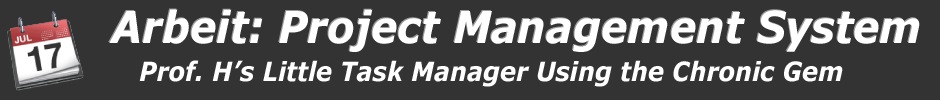
<style>
.page{position:relative;width:940px;height:100px;background:#333333}
.page>*{position:absolute;margin:0}
.t1{font:44px "Verdana-BoldItalic";color:#ffffff;scale:0.91 1}
.t2{font:26.4px "Verdana-BoldItalic";color:#ffffff;scale:0.91 1}
</style>
<div class="page">
<p class="t1" style="left:108px;top:8px;width:811px;height:43px">Arbeit: Project Management System</p>
<p class="t1" style="left:109px;top:9px;width:811px;height:43px">Arbeit: Project Management System</p>
<p class="t2" style="left:139px;top:60px;width:704px;height:27px">Prof. H’s Little Task Manager Using the Chronic Gem</p>
</div>
